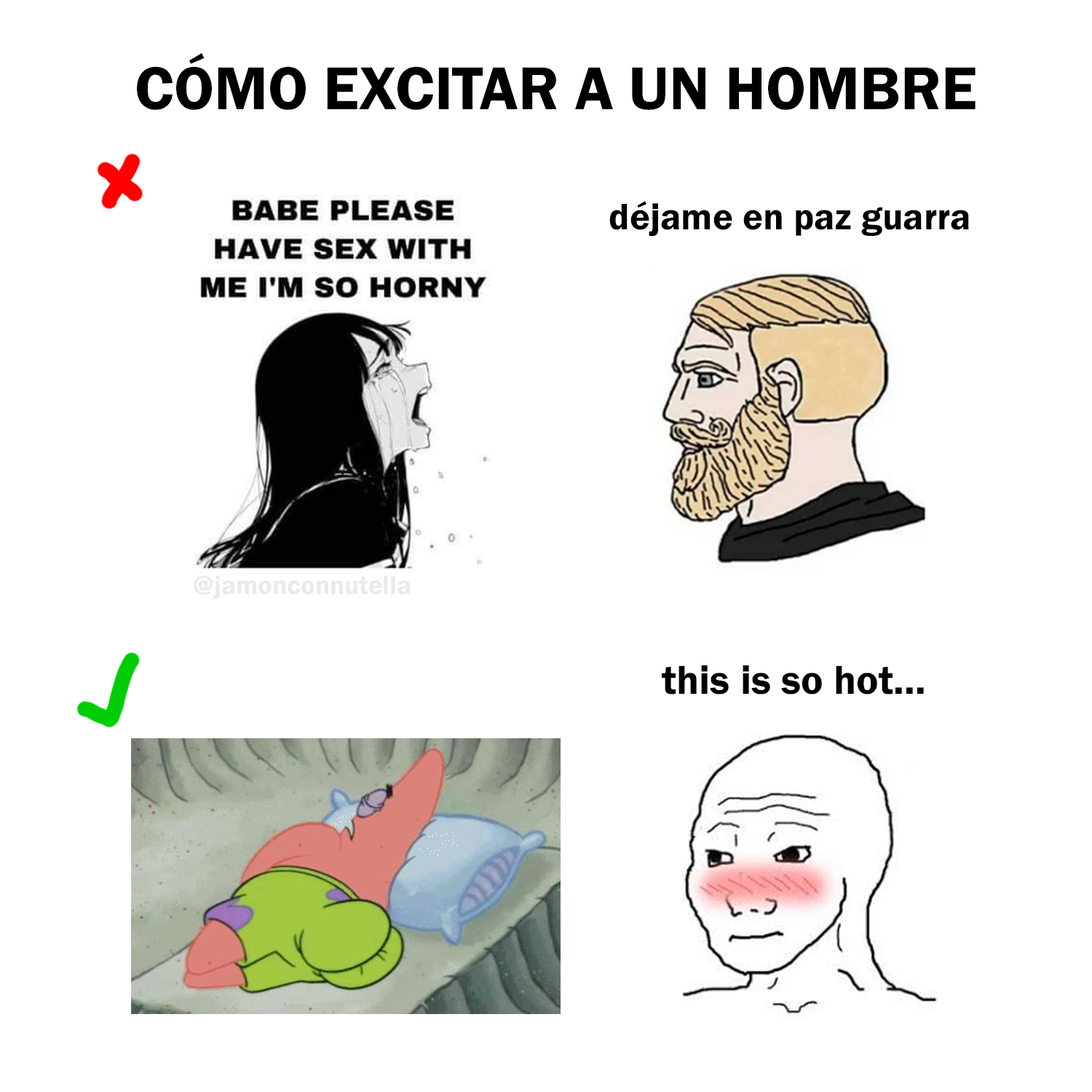
<style>
.page{position:relative;width:1092px;height:1092px;background:#ffffff}
.page>*{position:absolute;margin:0}
.t1{font:62.6px "FranklinGothic-Demi";color:#000000}
.t2{font:38.2px "FranklinGothic-Demi";color:#000000}
.t3{font:26.8px "FranklinGothic-Demi";color:#eaeaea}
.t4{font:41.6px "FranklinGothic-Demi";color:#000000}
</style>
<div class="page">
<p class="t1" style="left:137px;top:53px;width:839px;height:57px">CÓMO EXCITAR A UN HOMBRE</p>
<p class="t2" style="left:609px;top:201px;width:360px;height:36px">déjame en paz guarra</p>
<p class="t3" style="left:194px;top:575px;width:217px;height:24px">@jamonconnutella</p>
<p class="t4" style="left:662px;top:665px;width:262px;height:30px">this is so hot...</p>
</div>
